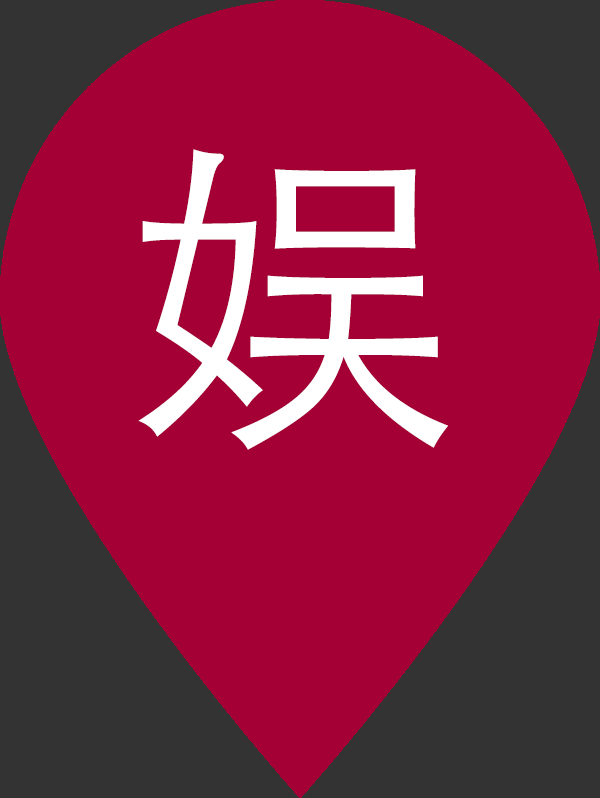
<style>
.page{position:relative;width:600px;height:798px;background:#a40035}
.page>*{position:absolute;margin:0}
.t1{font:333.3px "STXihei";color:#ffffff}
</style>
<div class="page">
<p class="t1" style="left:138px;top:149px;width:310px;height:301px">娱</p>
</div>
